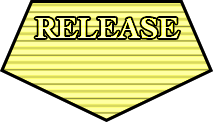
<style>
.page{position:relative;width:213px;height:122px;background:#ffffff}
.page>*{position:absolute;margin:0}
.t1{font:30px "Cochin-Bold"}
</style>
<div class="page">
<p class="t1" style="left:35px;top:18px;width:145px;height:20px">RELEASE</p>
</div>
